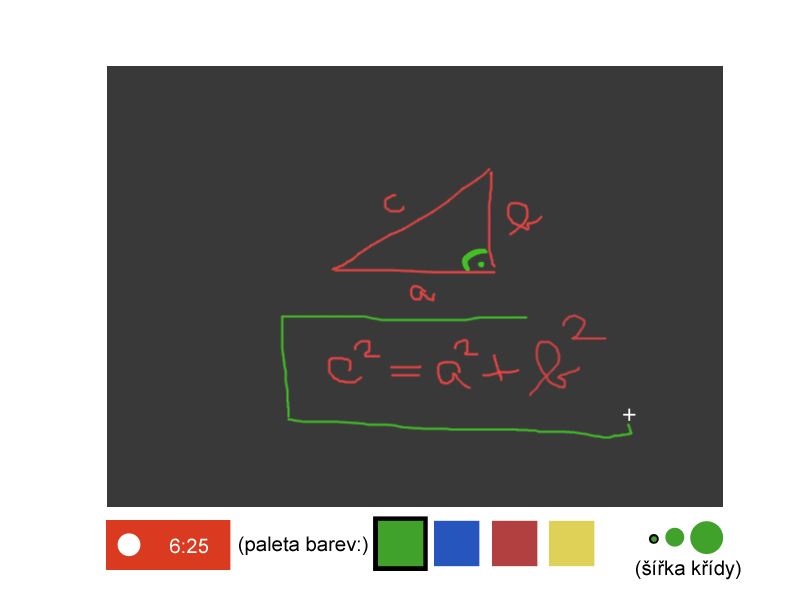
<style>
.page{position:relative;width:800px;height:600px;background:#393939}
.page>*{position:absolute;margin:0}
.t1{font:20.3px "ArialMT";color:#ffffff}
.t2{font:20.3px "ArialMT";color:#000000}
</style>
<div class="page">
<p class="t1" style="left:170px;top:538px;width:38px;height:16px">6:25</p>
<p class="t2" style="left:239px;top:536px;width:129px;height:19px">(paleta barev:)</p>
<p class="t2" style="left:636px;top:560px;width:105px;height:20px">(šířka křídy)</p>
</div>
